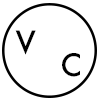
<style>
.page{position:relative;width:100px;height:100px;background:#ffffff}
.page>*{position:absolute;margin:0}
.t1{font:30px "Futura-Medium";color:#000000}
</style>
<div class="page">
<p class="t1" style="left:15px;top:30px;width:21px;height:25px">V</p>
<p class="t1" style="left:62px;top:53px;width:18px;height:24px">C</p>
</div>
